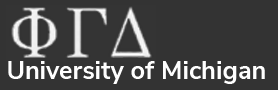
<style>
.page{position:relative;width:278px;height:90px;background:#333333}
.page>*{position:absolute;margin:0}
.t1{font:25.3px "NunitoSans-Bold";color:#ffffff}
</style>
<div class="page">
<p class="t1" style="left:8px;top:61px;width:257px;height:23px">University of Michigan</p>
</div>
